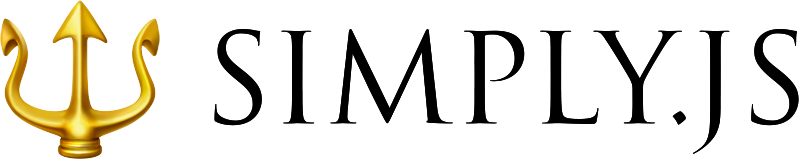
<style>
.page{position:relative;width:802px;height:160px;background:#ffffff}
.page>*{position:absolute;margin:0}
.t1{font:122.6px "TrajanColor-Concept";color:#000000}
</style>
<div class="page">
<p class="t1" style="left:214px;top:29px;width:585px;height:125px">simply.js</p>
</div>
